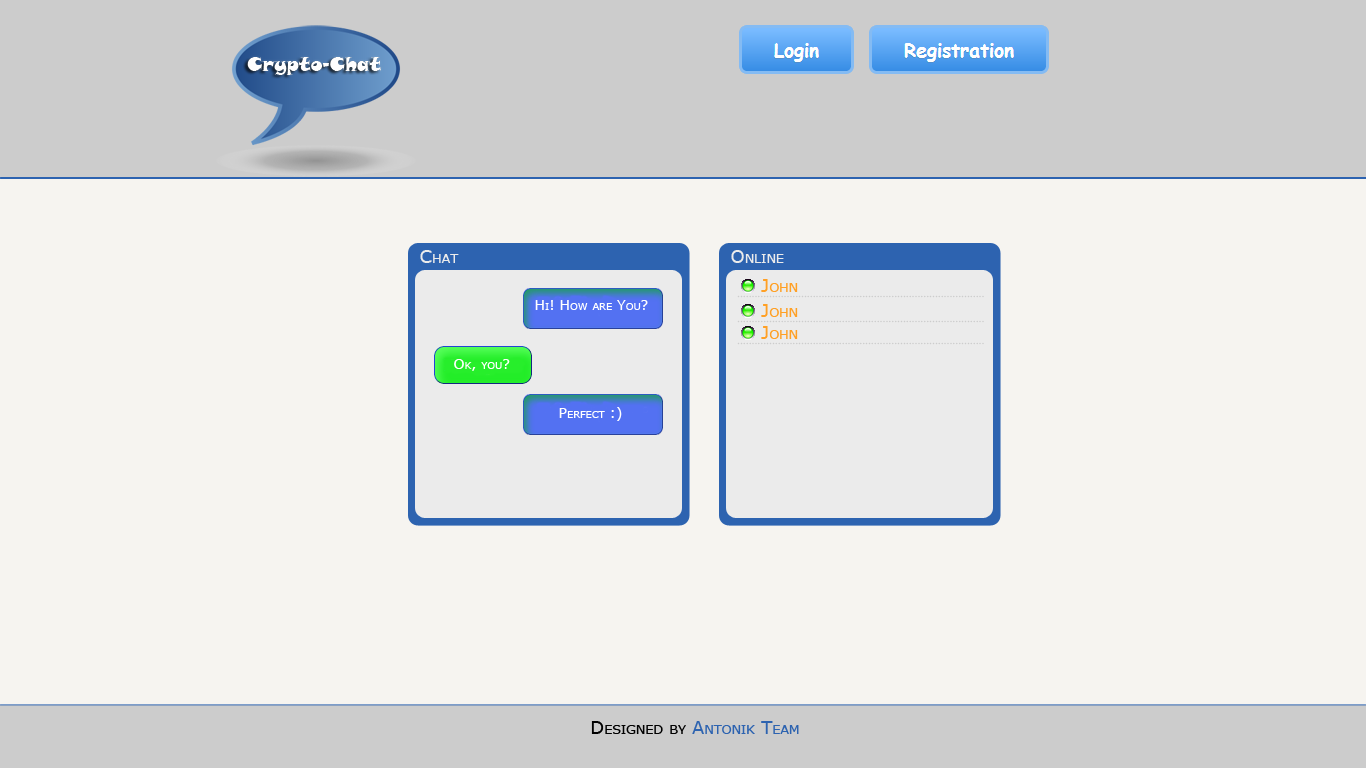
<style>
.page{position:relative;width:1366px;height:768px;background:#f6f4f0}
.page>*{position:absolute;margin:0}
.t1{font:18px "MSReferenceSansSerif";color:#ebebeb;font-variant:small-caps}
.t2{font:18px "MSReferenceSansSerif";color:#ffa025;font-variant:small-caps}
.t3{font:14px "MSReferenceSansSerif";color:#ffffff;font-variant:small-caps}
.t4{font:8px "MSReferenceSansSerif";color:#cccccc;font-variant:small-caps}
.t5{font:18px "MSReferenceSansSerif";color:#2d63b0;font-variant:small-caps}
.t6{font:18px "MSReferenceSansSerif";color:#000000;font-variant:small-caps}
</style>
<div class="page">
<p class="t1" style="left:420px;top:250px;width:39px;height:13px">Chat</p>
<p class="t1" style="left:731px;top:250px;width:53px;height:13px">Online</p>
<p class="t2" style="left:761px;top:279px;width:37px;height:13px">John</p>
<p class="t3" style="left:535px;top:300px;width:113px;height:10px">Hi! How are You?</p>
<p class="t4" style="left:737px;top:295px;width:247px;height:3px">.....................................................................................</p>
<p class="t2" style="left:761px;top:304px;width:37px;height:13px">John</p>
<p class="t4" style="left:737px;top:320px;width:247px;height:3px">.....................................................................................</p>
<p class="t2" style="left:761px;top:326px;width:37px;height:13px">John</p>
<p class="t4" style="left:737px;top:342px;width:247px;height:3px">.....................................................................................</p>
<p class="t3" style="left:454px;top:359px;width:56px;height:12px">Ok, you?</p>
<p class="t3" style="left:559px;top:407px;width:63px;height:14px">Perfect :)</p>
<p class="t5" style="left:591px;top:721px;width:208px;height:13px"><span class="t6">Designed by</span> Antonik Team</p>
</div>
